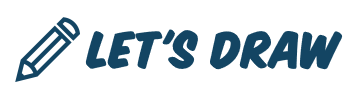
<style>
.page{position:relative;width:360px;height:100px;background:#ffffff}
.page>*{position:absolute;margin:0}
.t1{font:40px "KomikaTitle-Paint";color:#134563}
</style>
<div class="page">
<p class="t1" style="left:85px;top:29px;width:258px;height:41px">Let's Draw</p>
</div>
